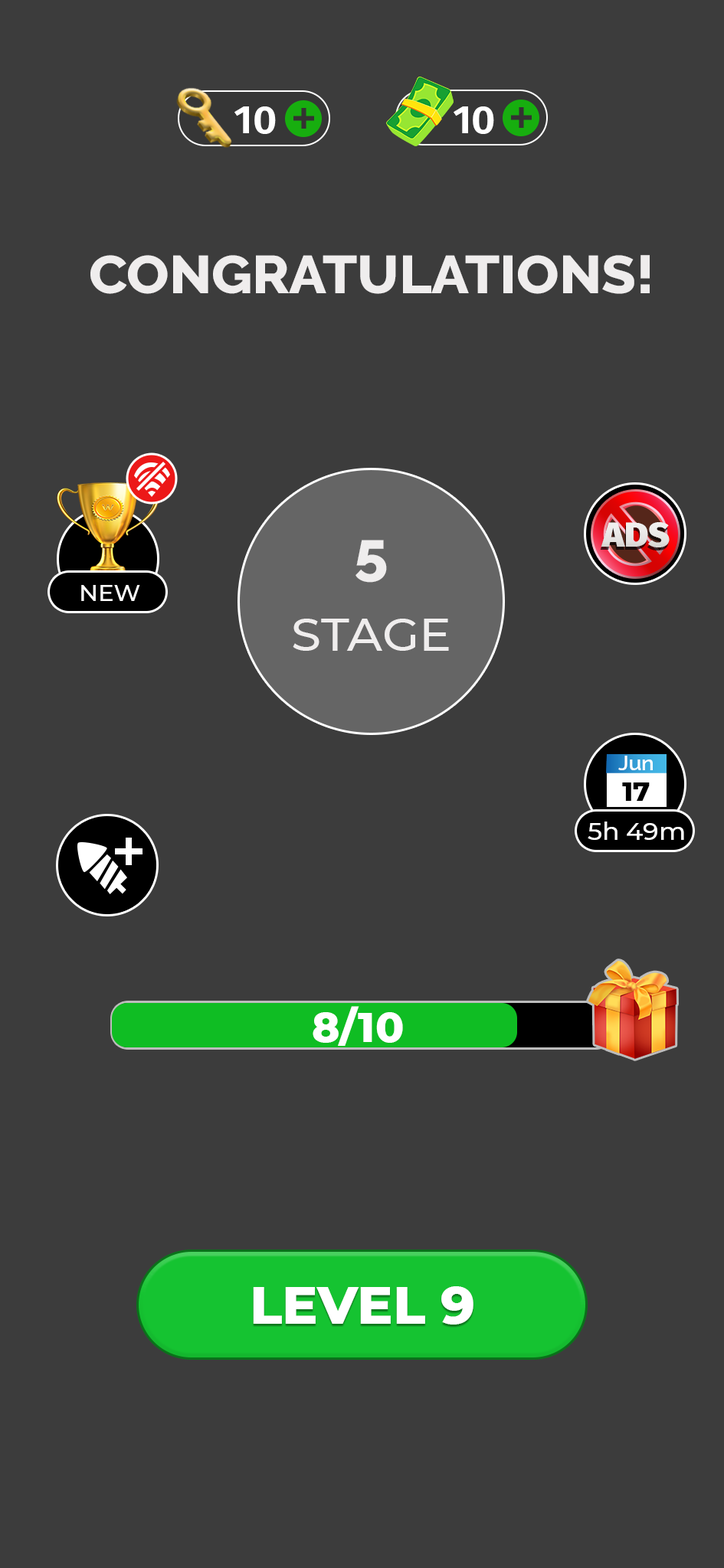
<style>
.page{position:relative;width:724px;height:1568px;background:#3c3c3c}
.page>*{position:absolute;margin:0}
.t1{font:39.7px "FiraSans-SemiBold";color:#ffffff;scale:1.05 1}
.t2{font:53px "Raleway-ExtraBold";color:#efeded;scale:1.05 1}
.t3{font:34.7px "FiraSans-Black";color:#e9e8e7;scale:1.05 1}
.t4{font:58.2px "Raleway-ExtraBold";color:#efeded;scale:1.05 1}
.t5{font:22.4px "Montserrat-Medium";color:#ffffff;scale:1.05 1}
.t6{font:45.6px "Montserrat-Medium";color:#efeded;scale:1.05 1}
.t7{font:19.8px "Raleway-SemiBold";color:#ffffff;scale:1.06 1}
.t8{font:25.6px "Montserrat-ExtraBold";color:#000000;scale:1.06 1}
.t9{font:24.2px "Montserrat-Medium";color:#ffffff;scale:1.05 1}
.t10{font:41.8px "Montserrat-ExtraBold";color:#ffffff}
.t11{font:53.2px "Montserrat-ExtraBold";color:#ffffff}
</style>
<div class="page">
<p class="t1" style="left:234px;top:106px;width:42px;height:28px">10</p>
<p class="t1" style="left:453px;top:106px;width:41px;height:28px">10</p>
<p class="t2" style="left:90px;top:255px;width:559px;height:39px">CONGRATULATIONS!</p>
<p class="t3" style="left:600px;top:522px;width:69px;height:25px">ADS</p>
<p class="t4" style="left:355px;top:540px;width:32px;height:43px">5</p>
<p class="t5" style="left:81px;top:585px;width:59px;height:16px">NEW</p>
<p class="t6" style="left:292px;top:619px;width:157px;height:32px">STAGE</p>
<p class="t7" style="left:618px;top:756px;width:34px;height:14px">Jun</p>
<p class="t8" style="left:622px;top:782px;width:27px;height:19px">17</p>
<p class="t9" style="left:587px;top:822px;width:97px;height:18px">5h 49m</p>
<p class="t10" style="left:312px;top:1006px;width:91px;height:40px">8/10</p>
<p class="t11" style="left:253px;top:1286px;width:220px;height:39px">LEVEL 9</p>
</div>
